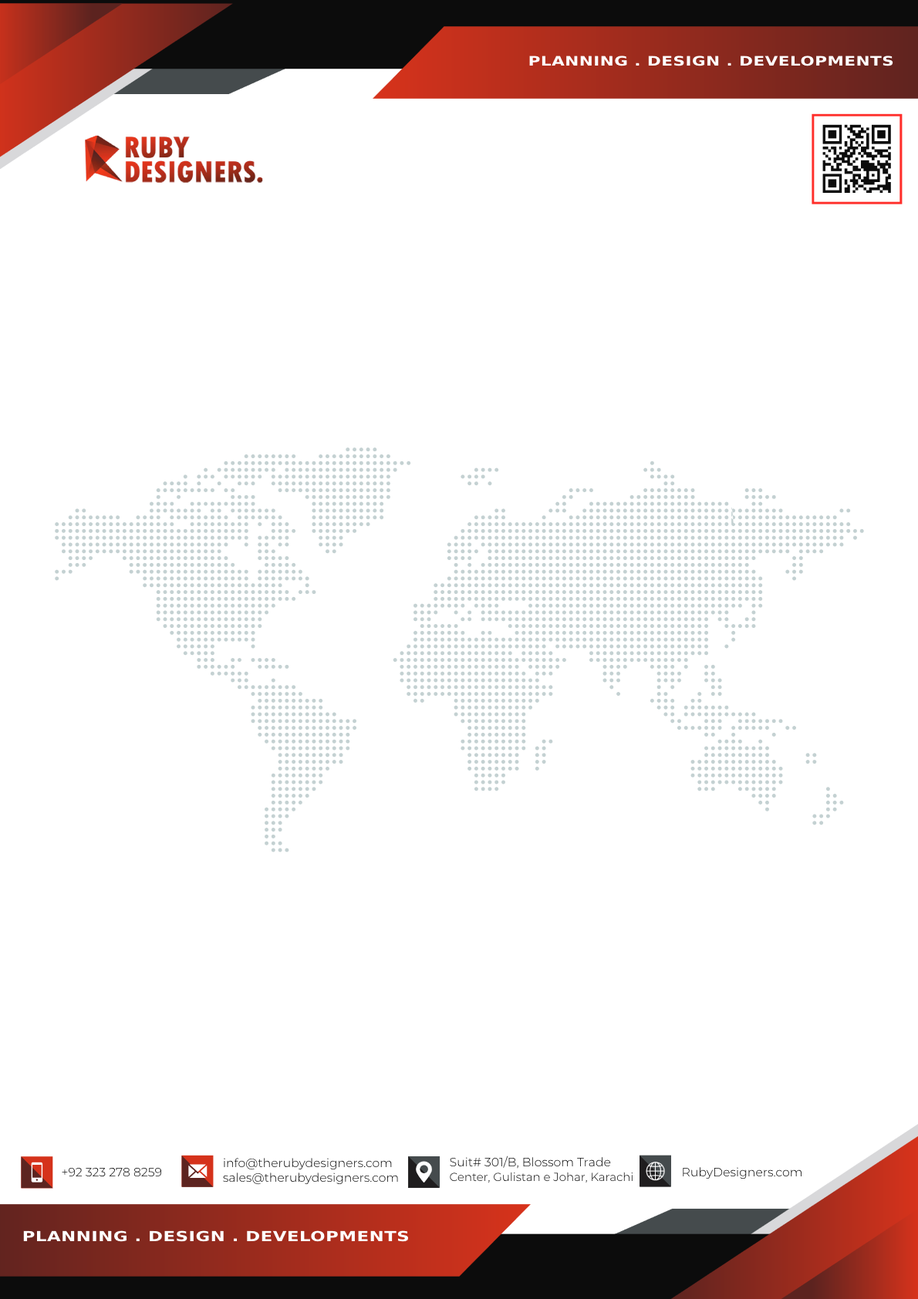
<style>
.page{position:relative;width:918px;height:1299px;background:#ffffff}
.page>*{position:absolute;margin:0}
.t1{font:13.1px "TwCenMT-Bold";letter-spacing:0.025em;color:#ffffff;scale:1.27 1}
.t2{font:12.1px "Montserrat-Light";color:#0c0c0c}
.t3{font:12.2px "Montserrat-Light";color:#0c0c0c}
.t4{font:11.6px "Montserrat-Light";color:#0c0c0c}
.t5{font:13.9px "TwCenMT-Bold";letter-spacing:0.025em;color:#ffffff;scale:1.27 1}
</style>
<div class="page">
<p class="t1" style="left:529px;top:56px;width:364px;height:10px">PLANNING . DESIGN . DEVELOPMENTS</p>
<p class="t2" style="left:224px;top:1158px;width:168px;height:12px">info@therubydesigners.com</p>
<p class="t2" style="left:450px;top:1156px;width:161px;height:13px">Suit# 301/B, Blossom Trade</p>
<p class="t3" style="left:62px;top:1167px;width:100px;height:10px">+92 323 278 8259</p>
<p class="t2" style="left:683px;top:1167px;width:118px;height:12px">RubyDesigners.com</p>
<p class="t2" style="left:223px;top:1173px;width:175px;height:12px">sales@therubydesigners.com</p>
<p class="t4" style="left:450px;top:1172px;width:183px;height:11px">Center, Gulistan e Johar, Karachi</p>
<p class="t5" style="left:23px;top:1230px;width:386px;height:12px">PLANNING . DESIGN . DEVELOPMENTS</p>
</div>
